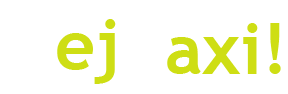
<style>
.page{position:relative;width:288px;height:94px;background:#ffffff}
.page>*{position:absolute;margin:0}
.t1{font:70px "TrebuchetMS-Bold";color:#cede14}
.t2{font:70px "TrebuchetMS-Bold";color:#ffffff}
</style>
<div class="page">
<p class="t1" style="left:12px;top:19px;width:104px;height:65px"><span class="t2">H</span>ej</p>
<p class="t1" style="left:130px;top:23px;width:151px;height:51px"><span class="t2">T</span>axi!</p>
</div>
